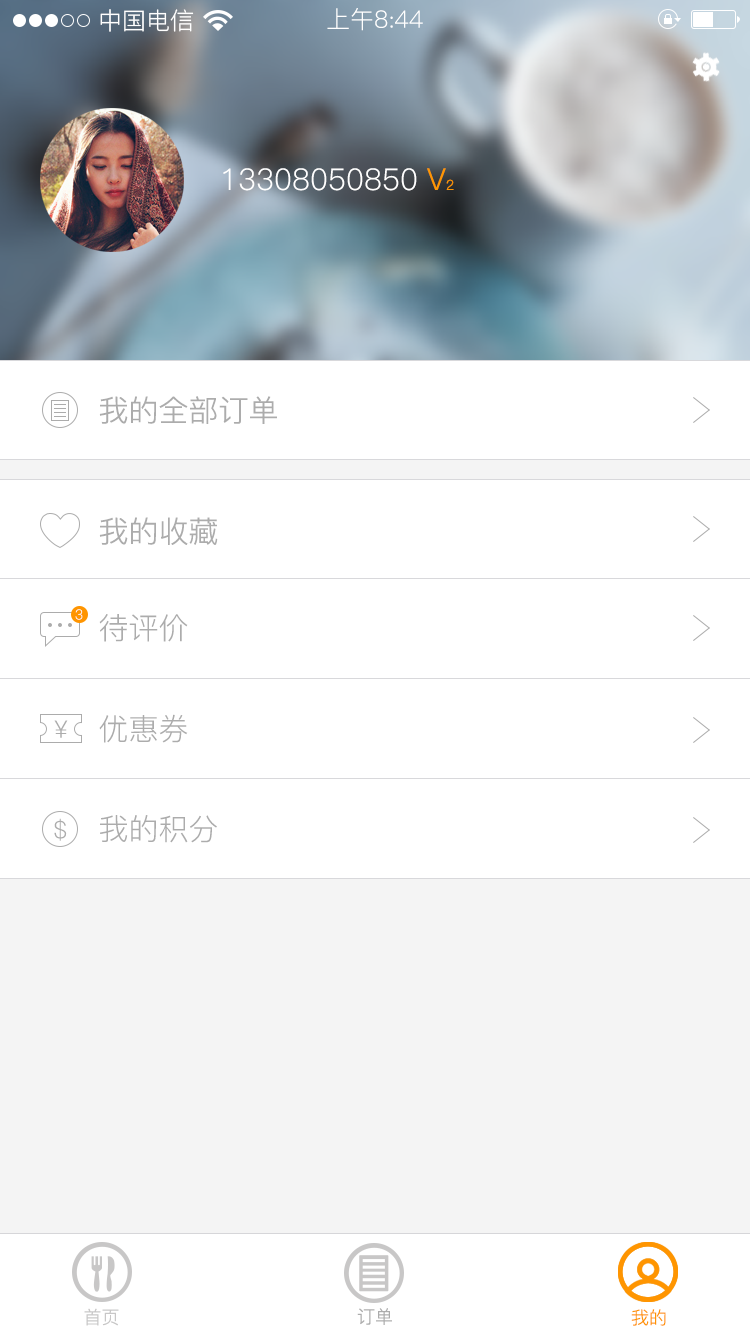
<style>
.page{position:relative;width:750px;height:1334px;background:#ffffff}
.page>*{position:absolute;margin:0}
.t1{font:24px "PingFang-SC-Regular";color:#ffffff}
.t2{font:30px "PingFang-SC-Regular";color:#ffffff}
.t3{font:30px "PingFang-SC-Regular";color:#fe9603}
.t4{font:14px "PingFang-SC-Regular";color:#fe9603}
.t5{font:30px "PingFang-SC-Regular";color:#acacac}
.t6{font:14px "PingFang-SC-Regular"}
.t7{font:24px "PingFang-SC-Regular";color:#acacac}
.t8{font:18px "PingFang-SC-Regular";color:#c8c7c7}
.t9{font:18px "PingFang-SC-Regular";color:#acacac}
.t10{font:18px "PingFang-SC-Regular";color:#ff9500}
</style>
<div class="page">
<p class="t1" style="left:100px;top:9px;width:94px;height:23px">中国电信</p>
<p class="t1" style="left:327px;top:8px;width:96px;height:23px">上午8:44</p>
<p class="t2" style="left:223px;top:168px;width:194px;height:23px">13308050850</p>
<p class="t3" style="left:427px;top:168px;width:27px;height:22px">V<span class="t4">2</span></p>
<p class="t5" style="left:99px;top:396px;width:178px;height:28px">我的全部订单</p>
<p class="t5" style="left:99px;top:517px;width:119px;height:28px">我的收藏</p>
<p class="t6" style="left:75px;top:609px;width:8px;height:11px">3</p>
<p class="t5" style="left:99px;top:614px;width:89px;height:28px">待评价</p>
<p class="t7" style="left:54px;top:720px;width:14px;height:18px">¥</p>
<p class="t5" style="left:99px;top:714px;width:89px;height:29px">优惠券</p>
<p class="t7" style="left:54px;top:818px;width:13px;height:23px">＄</p>
<p class="t5" style="left:100px;top:815px;width:117px;height:28px">我的积分</p>
<p class="t8" style="left:84px;top:1308px;width:35px;height:18px">首页</p>
<p class="t9" style="left:357px;top:1308px;width:35px;height:17px">订单</p>
<p class="t10" style="left:631px;top:1309px;width:35px;height:17px">我的</p>
</div>
